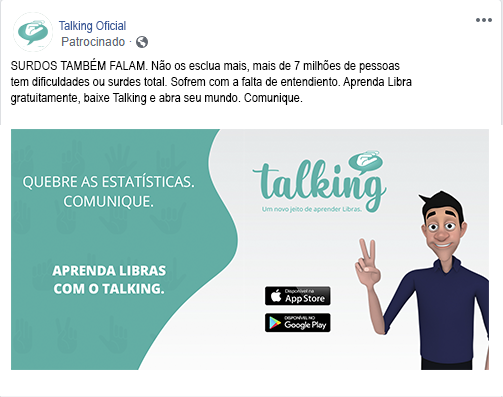
<style>
.page{position:relative;width:503px;height:397px;background:#ffffff}
.page>*{position:absolute;margin:0}
.t1{font:13.3px "ArialNarrow";color:#385898}
.t2{font:13.3px "ArialNarrow";color:#000000}
</style>
<div class="page">
<p class="t1" style="left:58px;top:21px;width:68px;height:12px">Talking Oficial</p>
<p class="t2" style="left:10px;top:58px;width:402px;height:47px">SURDOS TAMBÉM FALAM. Não os esclua mais, mais de 7 milhões de pessoas tem dificuldades ou surdes total. Sofrem com a falta de entendiento. Aprenda Libra gratuitamente, baixe Talking e abra seu mundo. Comunique.</p>
</div>
